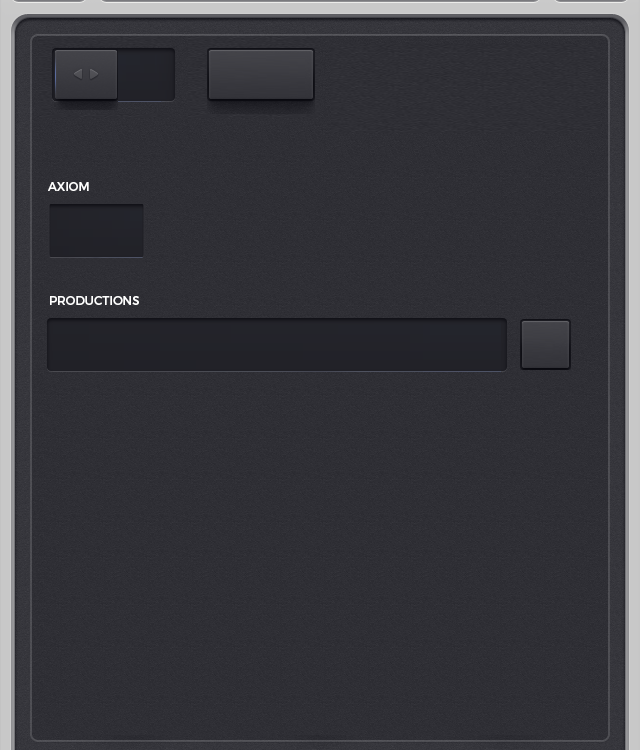
<style>
.page{position:relative;width:640px;height:750px}
.page>*{position:absolute;margin:0}
.t1{font:12px "Montserrat-Regular";color:#ffffff}
</style>
<div class="page">
<p class="t1" style="left:48px;top:182px;width:41px;height:9px">AXIOM</p>
<p class="t1" style="left:50px;top:296px;width:89px;height:9px">PRODUCTIONS</p>
</div>
